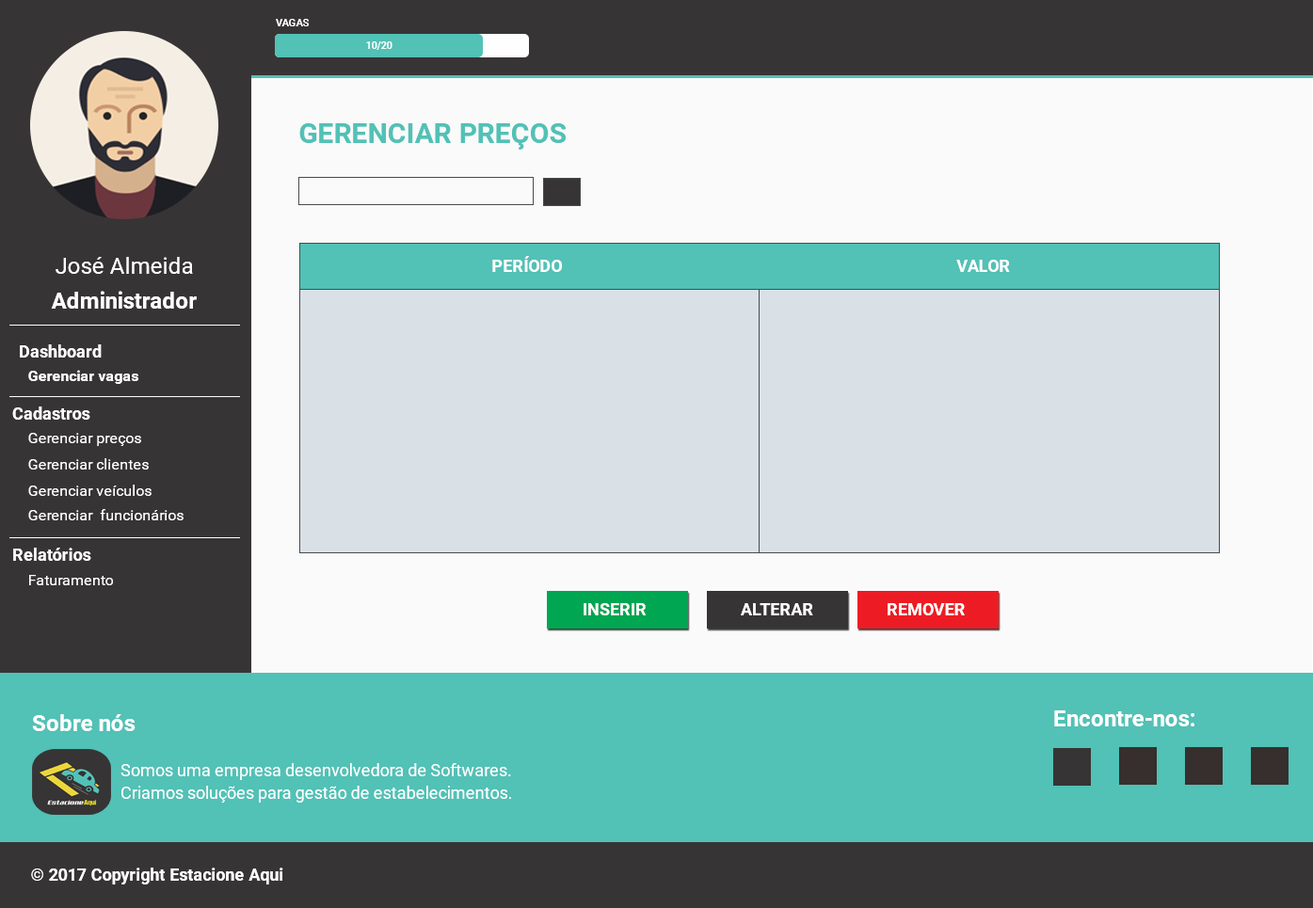
<style>
.page{position:relative;width:1313px;height:908px;background:#fafafa}
.page>*{position:absolute;margin:0}
.t1{font:10.4px "Roboto-Bold";color:#fefefe;text-transform:uppercase}
.t2{font:10.4px "Roboto-Bold";color:#fefefe}
.t3{font:28.2px "Roboto-Bold";color:#52c1b6;text-transform:uppercase}
.t4{font:22.6px "Roboto-Regular";color:#fefefe}
.t5{font:16.9px "Roboto-Bold";color:#fefefe;text-transform:uppercase}
.t6{font:22.6px "Roboto-Bold";color:#fefefe}
.t7{font:16.9px "Roboto-Bold";color:#fefefe}
.t8{font:15.1px "Roboto-Bold";color:#fefefe}
.t9{font:15.1px "Roboto-Regular";color:#fefefe}
.t10{font:16.9px/22.6px "Roboto-Regular";color:#fefefe}
</style>
<div class="page">
<p class="t1" style="left:276px;top:19px;width:33px;height:7px">Vagas</p>
<p class="t2" style="left:366px;top:41px;width:26px;height:9px">10/20</p>
<p class="t3" style="left:299px;top:123px;width:267px;height:27px">gerenciar preços</p>
<p class="t4" style="left:56px;top:257px;width:137px;height:17px">José Almeida</p>
<p class="t5" style="left:492px;top:256px;width:70px;height:16px">período</p>
<p class="t5" style="left:956px;top:260px;width:54px;height:12px">valor</p>
<p class="t6" style="left:51px;top:291px;width:146px;height:18px">Administrador</p>
<p class="t7" style="left:20px;top:344px;width:82px;height:14px">Dashboard</p>
<p class="t8" style="left:28px;top:370px;width:110px;height:14px">Gerenciar vagas</p>
<p class="t7" style="left:12px;top:407px;width:78px;height:13px">Cadastros</p>
<p class="t9" style="left:28px;top:433px;width:113px;height:13px">Gerenciar preços</p>
<p class="t9" style="left:28px;top:458px;width:121px;height:12px">Gerenciar clientes</p>
<p class="t9" style="left:28px;top:485px;width:124px;height:11px">Gerenciar veículos</p>
<p class="t9" style="left:28px;top:509px;width:156px;height:11px">Gerenciar  funcionários</p>
<p class="t7" style="left:13px;top:548px;width:78px;height:13px">Relatórios</p>
<p class="t9" style="left:29px;top:575px;width:84px;height:10px">Faturamento</p>
<p class="t5" style="left:584px;top:603px;width:62px;height:13px">INSERIR</p>
<p class="t5" style="left:741px;top:603px;width:72px;height:13px">ALTERAR</p>
<p class="t5" style="left:888px;top:603px;width:77px;height:13px">REMOVER</p>
<p class="t6" style="left:1054px;top:711px;width:140px;height:16px">Encontre-nos:</p>
<p class="t6" style="left:32px;top:714px;width:104px;height:17px">Sobre nós</p>
<p class="t10" style="left:120px;top:763px;width:391px;height:40px">Somos uma empresa desenvolvedora de Softwares. Criamos soluções para gestão de estabelecimentos.</p>
<p class="t7" style="left:31px;top:868px;width:252px;height:17px">© 2017 Copyright Estacione Aqui</p>
</div>
